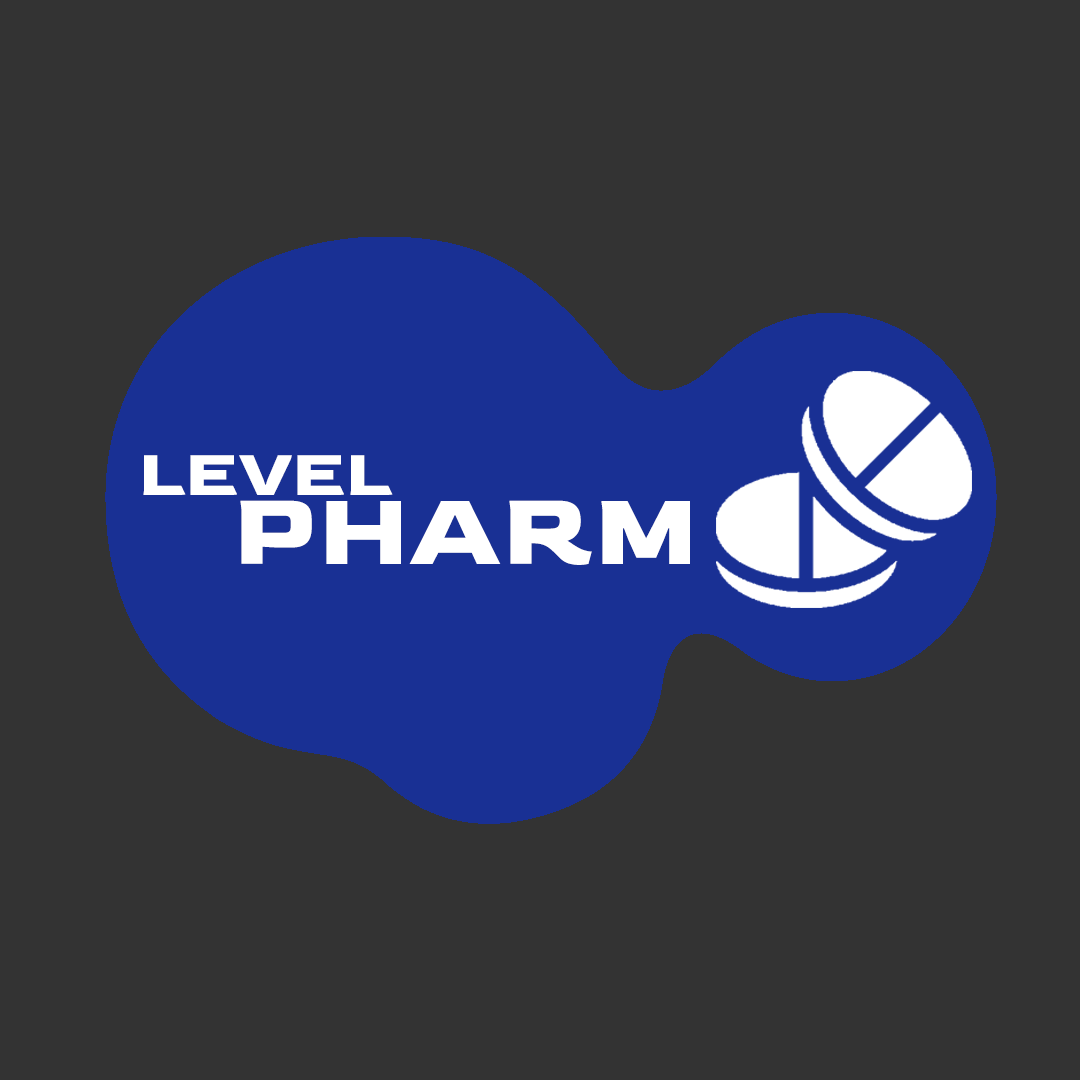
<style>
.page{position:relative;width:1080px;height:1080px;background:#333333}
.page>*{position:absolute;margin:0}
.t1{font:67.8px "Goldman-Bold";color:#ffffff}
.t2{font:106.7px "Goldman-Bold";color:#ffffff}
</style>
<div class="page">
<p class="t1" style="left:143px;top:455px;width:250px;height:40px">LEVEL</p>
<p class="t2" style="left:240px;top:500px;width:450px;height:65px">PHARM</p>
</div>
